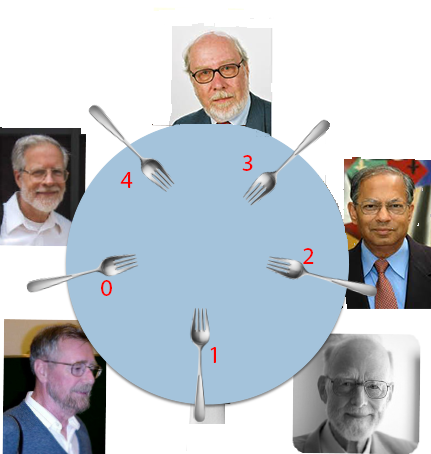
<style>
.page{position:relative;width:431px;height:454px;background:#ffffff}
.page>*{position:absolute;margin:0}
.t1{font:24px "MyriadPro-Regular";color:#ff0000}
</style>
<div class="page">
<p class="t1" style="left:242px;top:155px;width:11px;height:16px">3</p>
<p class="t1" style="left:120px;top:172px;width:13px;height:16px">4</p>
<p class="t1" style="left:303px;top:248px;width:11px;height:16px">2</p>
<p class="t1" style="left:101px;top:280px;width:11px;height:16px">0</p>
<p class="t1" style="left:210px;top:347px;width:6px;height:16px">1</p>
</div>
